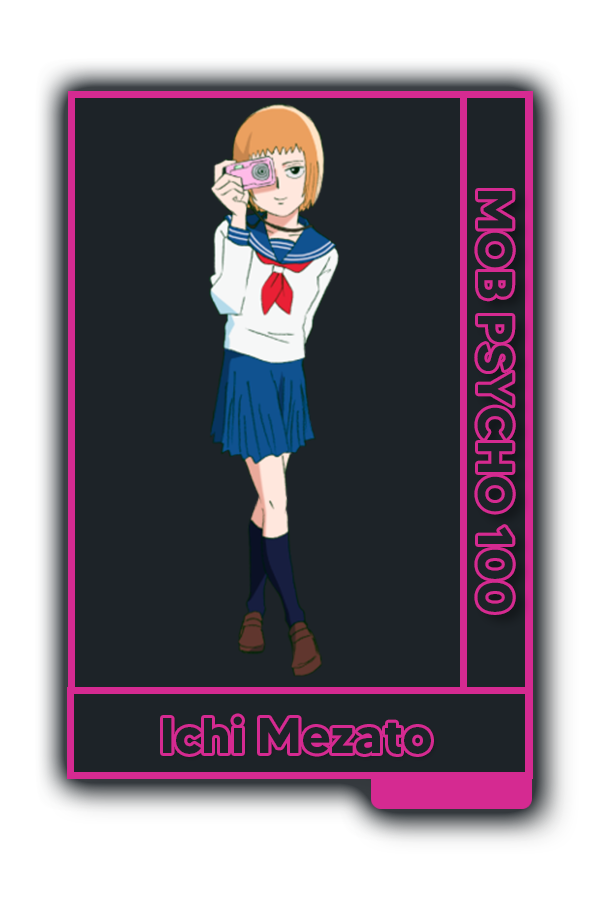
<style>
.page{position:relative;width:600px;height:900px;background:#1d2328}
.page>*{position:absolute;margin:0}
.t1{font:48.8px "MADETOMMY-Bold";color:#1d2328}
.t2{font:49.7px "MADETOMMY-Bold";color:#1d2328}
</style>
<div class="page">
<p class="t1" style="left:477px;top:191px;width:36px;height:421px;rotate:90deg">MOB PSYCHO 100</p>
<p class="t2" style="left:163px;top:716px;width:268px;height:38px">Ichi Mezato</p>
</div>
